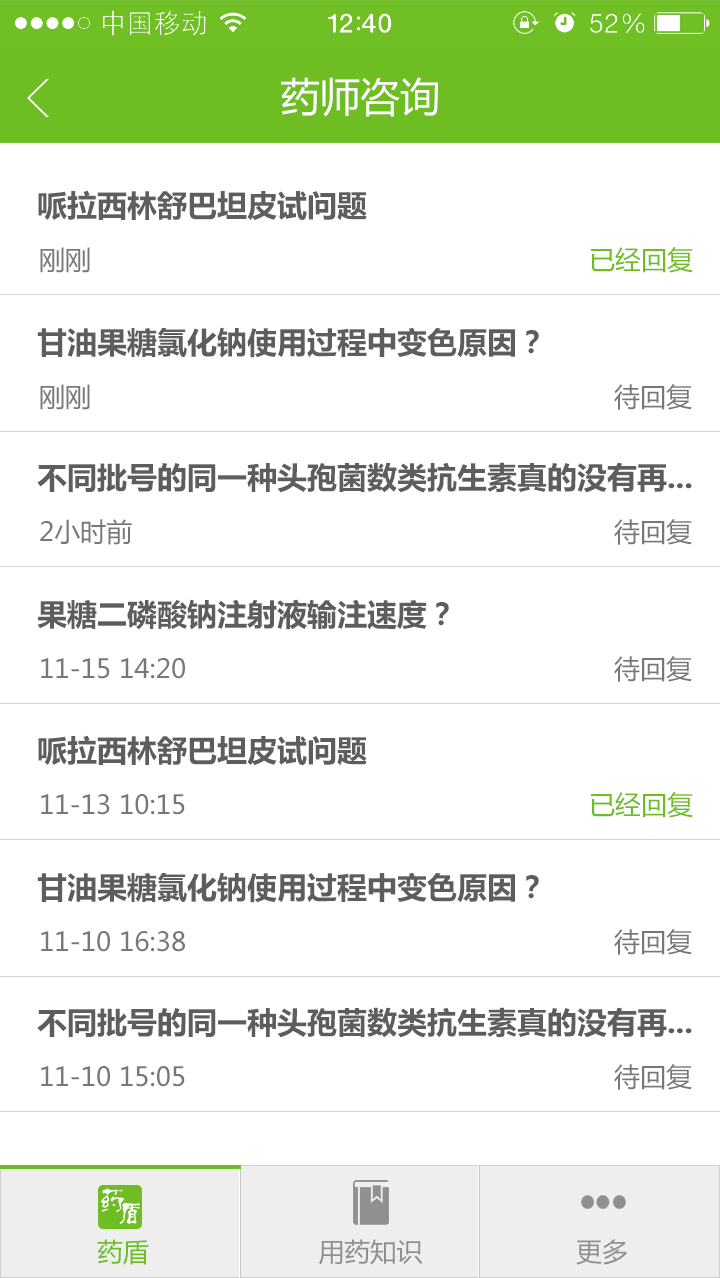
<style>
.page{position:relative;width:720px;height:1278px;background:#ffffff}
.page>*{position:absolute;margin:0}
.t1{font:40px "MicrosoftYaHei";color:#ffffff}
.t2{font:30px "MicrosoftYaHei-Bold";color:#5d5d5d}
.t3{font:26px "MicrosoftYaHei";color:#777777}
.t4{font:26px "MicrosoftYaHei";color:#6ebe23}
.t5{font:26px "MicrosoftYaHei";color:#8f8f8f}
</style>
<div class="page">
<p class="t1" style="left:281px;top:77px;width:157px;height:40px">药师咨询</p>
<p class="t2" style="left:38px;top:190px;width:329px;height:31px">哌拉西林舒巴坦皮试问题</p>
<p class="t3" style="left:40px;top:247px;width:50px;height:26px">刚刚</p>
<p class="t4" style="left:591px;top:247px;width:102px;height:26px">已经回复</p>
<p class="t2" style="left:37px;top:327px;width:502px;height:31px">甘油果糖氯化钠使用过程中变色原因？</p>
<p class="t3" style="left:40px;top:384px;width:50px;height:26px">刚刚</p>
<p class="t3" style="left:614px;top:384px;width:78px;height:26px">待回复</p>
<p class="t2" style="left:37px;top:462px;width:655px;height:31px">不同批号的同一种头孢菌数类抗生素真的没有再...</p>
<p class="t3" style="left:40px;top:519px;width:92px;height:26px">2小时前</p>
<p class="t3" style="left:614px;top:519px;width:78px;height:26px">待回复</p>
<p class="t2" style="left:37px;top:599px;width:412px;height:31px">果糖二磷酸钠注射液输注速度？</p>
<p class="t3" style="left:41px;top:658px;width:144px;height:21px">11-15 14:20</p>
<p class="t3" style="left:614px;top:656px;width:78px;height:26px">待回复</p>
<p class="t2" style="left:38px;top:735px;width:329px;height:31px">哌拉西林舒巴坦皮试问题</p>
<p class="t3" style="left:41px;top:794px;width:144px;height:21px">11-13 10:15</p>
<p class="t4" style="left:591px;top:792px;width:102px;height:26px">已经回复</p>
<p class="t2" style="left:37px;top:872px;width:502px;height:31px">甘油果糖氯化钠使用过程中变色原因？</p>
<p class="t3" style="left:614px;top:929px;width:78px;height:26px">待回复</p>
<p class="t3" style="left:41px;top:931px;width:144px;height:21px">11-10 16:38</p>
<p class="t2" style="left:37px;top:1007px;width:655px;height:31px">不同批号的同一种头孢菌数类抗生素真的没有再...</p>
<p class="t3" style="left:41px;top:1066px;width:144px;height:21px">11-10 15:05</p>
<p class="t3" style="left:614px;top:1064px;width:78px;height:26px">待回复</p>
<p class="t5" style="left:97px;top:1239px;width:530px;height:26px"><span class="t4">药盾                      </span>用药知识                    更多</p>
</div>
